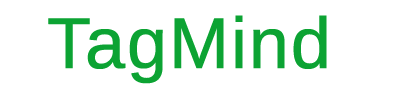
<style>
.page{position:relative;width:400px;height:100px;background:#ffffff}
.page>*{position:absolute;margin:0}
.t1{font:72px "Arimo";color:#0ca333;font-weight:bold}
</style>
<div class="page">
<p class="t1" style="left:48px;top:15px;width:279px;height:69px">TagMind</p>
</div>
